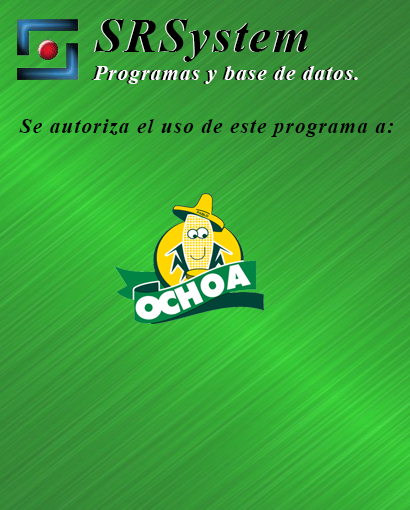
<style>
.page{position:relative;width:410px;height:510px}
.page>*{position:absolute;margin:0}
.t1{font:48px "TimesNewRomanPS-BoldItalicMT";letter-spacing:0.05em;color:#000000}
.t2{font:21.3px "TimesNewRomanPS-BoldItalicMT";letter-spacing:0.05em}
.t3{font:21.3px "TimesNewRomanPS-BoldItalicMT";letter-spacing:0.05em;color:#ffffff}
.t4{font:21.3px "TimesNewRomanPS-BoldItalicMT";letter-spacing:0.05em;color:#000000}
</style>
<div class="page">
<p class="t1" style="left:94px;top:19px;width:213px;height:43px">SRSystem</p>
<p class="t1" style="left:95px;top:19px;width:213px;height:43px">SRSystem</p>
<p class="t2" style="left:91px;top:66px;width:265px;height:18px">Programas y base de datos.</p>
<p class="t3" style="left:93px;top:66px;width:265px;height:18px">Programas y base de datos.</p>
<p class="t4" style="left:19px;top:119px;width:374px;height:18px">Se autoriza el uso de este programa a:</p>
</div>
